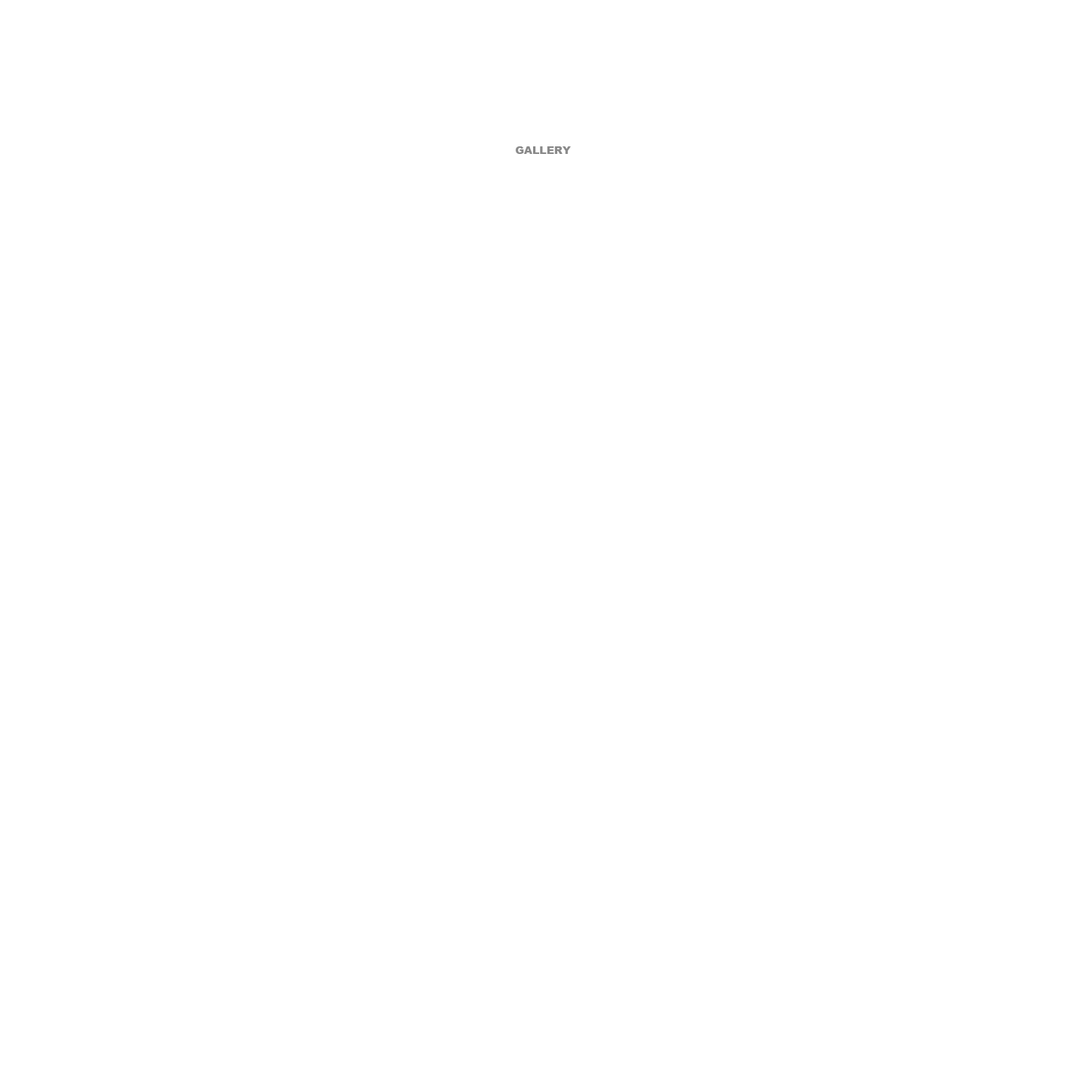
<style>
.page{position:relative;width:1092px;height:1092px;background:#ffffff}
.page>*{position:absolute;margin:0}
.t1{font:10.6px "Arial-Black";color:#898989}
</style>
<div class="page">
<p class="t1" style="left:516px;top:146px;width:55px;height:8px">GALLERY</p>
</div>
